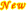
<style>
.page{position:relative;width:28px;height:11px;background:#ffffff}
.page>*{position:absolute;margin:0}
.t1{font:12px "MonotypeCorsiva";color:#fe3d01}
</style>
<div class="page">
<p class="t1" style="left:0px;top:1px;width:11px;height:9px">N</p>
<p class="t1" style="left:11px;top:3px;width:5px;height:6px">e</p>
<p class="t1" style="left:17px;top:3px;width:9px;height:6px">w</p>
</div>
